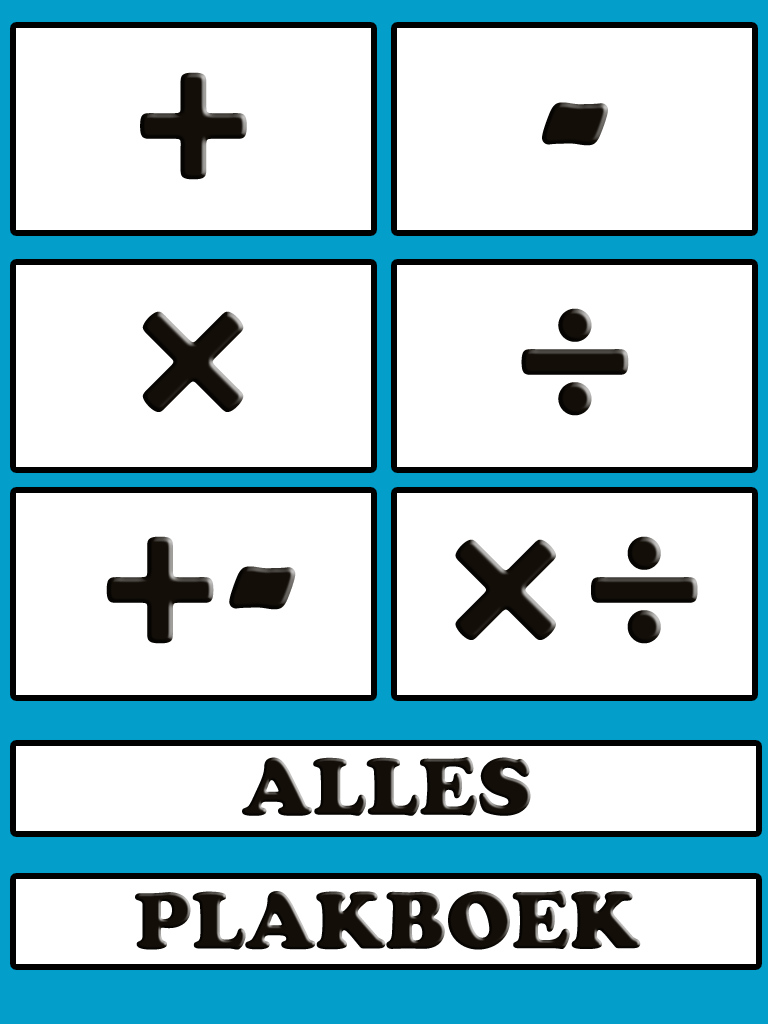
<style>
.page{position:relative;width:768px;height:1024px;background:#ffffff}
.page>*{position:absolute;margin:0}
.t1{font:220px "CooperBlackStd";color:#130e08}
.t2{font:80px "CooperBlackStd";color:#130e08}
.t3{font:80px "CooperBlackStd";color:#130e08;text-transform:uppercase}
.t4{font:80px "CopperplateGothic-Bold";color:#130e08;text-transform:uppercase}
</style>
<div class="page">
<p class="t1" style="left:140px;top:72px;width:107px;height:108px">+</p>
<p class="t1" style="left:542px;top:102px;width:66px;height:44px">-</p>
<p class="t1" style="left:142px;top:311px;width:102px;height:101px">×</p>
<p class="t1" style="left:521px;top:308px;width:108px;height:108px">÷</p>
<p class="t1" style="left:106px;top:536px;width:190px;height:108px">+-</p>
<p class="t1" style="left:455px;top:536px;width:243px;height:108px">×÷</p>
<p class="t2" style="left:242px;top:757px;width:289px;height:59px">ALLES</p>
<p class="t3" style="left:135px;top:890px;width:506px;height:60px"><span class="t4"><br><br></span><br><br><br><br><br><br><br><br><br><br><br><br><br><br><br>Plakboek</p>
</div>
